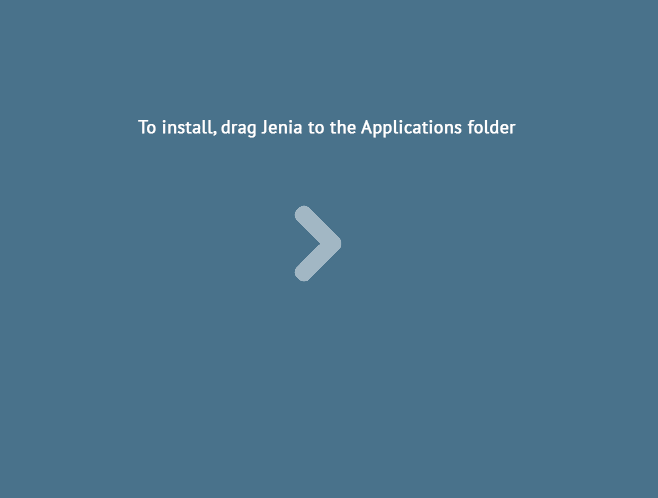
<style>
.page{position:relative;width:658px;height:498px;background:#49728b}
.page>*{position:absolute;margin:0}
.t1{font:18px "PTSans-Regular";color:#ffffff;font-weight:bold}
</style>
<div class="page">
<p class="t1" style="left:138px;top:120px;width:378px;height:18px">To install, drag Jenia to the Applications folder</p>
</div>
